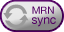
<style>
.page{position:relative;width:64px;height:32px}
.page>*{position:absolute;margin:0}
.t1{font:10px "HelveticaNeue";letter-spacing:-0.01em;color:#520063}
.t2{font:12px "HelveticaNeue";letter-spacing:-0.01em;color:#520063}
</style>
<div class="page">
<p class="t1" style="left:32px;top:6px;width:22px;height:8px">MRN</p>
<p class="t2" style="left:32px;top:17px;width:24px;height:10px">sync</p>
</div>
